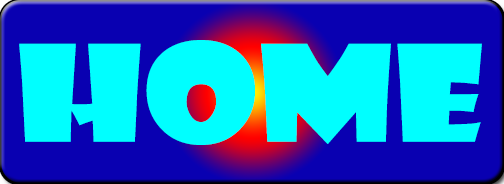
<style>
.page{position:relative;width:504px;height:184px;background:#0900b1}
.page>*{position:absolute;margin:0}
.t1{font:130.2px "ShowcardGothic-Reg";color:#00ffff;scale:1.26 1}
</style>
<div class="page">
<p class="t1" style="left:19px;top:40px;width:463px;height:105px">home</p>
</div>
